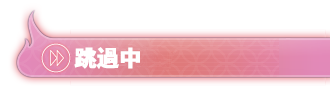
<style>
.page{position:relative;width:330px;height:90px;background:#ffffff}
.page>*{position:absolute;margin:0}
.t1{font:22px "SourceHanSansCN-Heavy";color:#ffffff;font-weight:bold}
</style>
<div class="page">
<p class="t1" style="left:74px;top:47px;width:66px;height:22px">跳過中</p>
</div>
